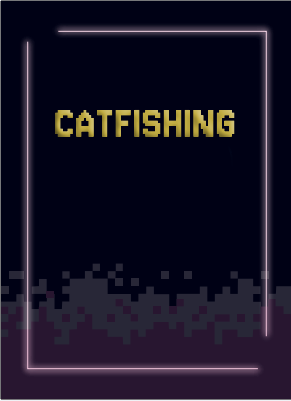
<style>
.page{position:relative;width:291px;height:401px;background:#000115}
.page>*{position:absolute;margin:0}
.t1{font:50px "Jersey10-Regular";letter-spacing:0.025em;scale:0.92 1}
</style>
<div class="page">
<p class="t1" style="left:55px;top:109px;width:180px;height:28px">CATFISHING</p>
</div>
